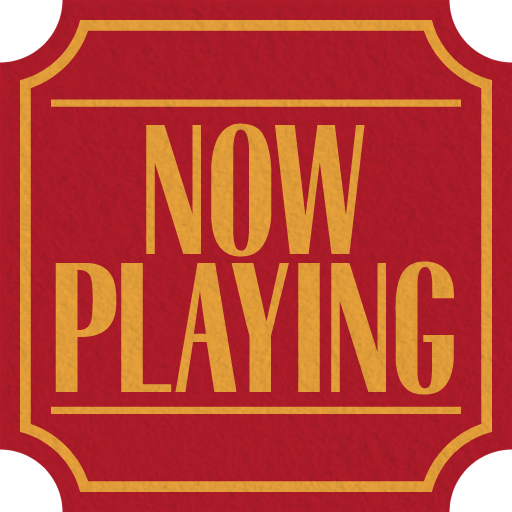
<style>
.page{position:relative;width:512px;height:512px}
.page>*{position:absolute;margin:0}
.t1{font:158.9px/137.7px "OPTIRadiantBold-Condensed";letter-spacing:0.02em;color:#e09c38}
</style>
<div class="page">
<p class="t1" style="left:55px;top:123px;width:399px;height:272px;text-align:center">NOW<br>PLAYING</p>
</div>
